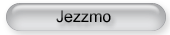
<style>
.page{position:relative;width:170px;height:35px}
.page>*{position:absolute;margin:0}
.t1{font:16px "ArialMT";color:#000000}
</style>
<div class="page">
<p class="t1" style="left:56px;top:10px;width:55px;height:13px">Jezzmo</p>
</div>
